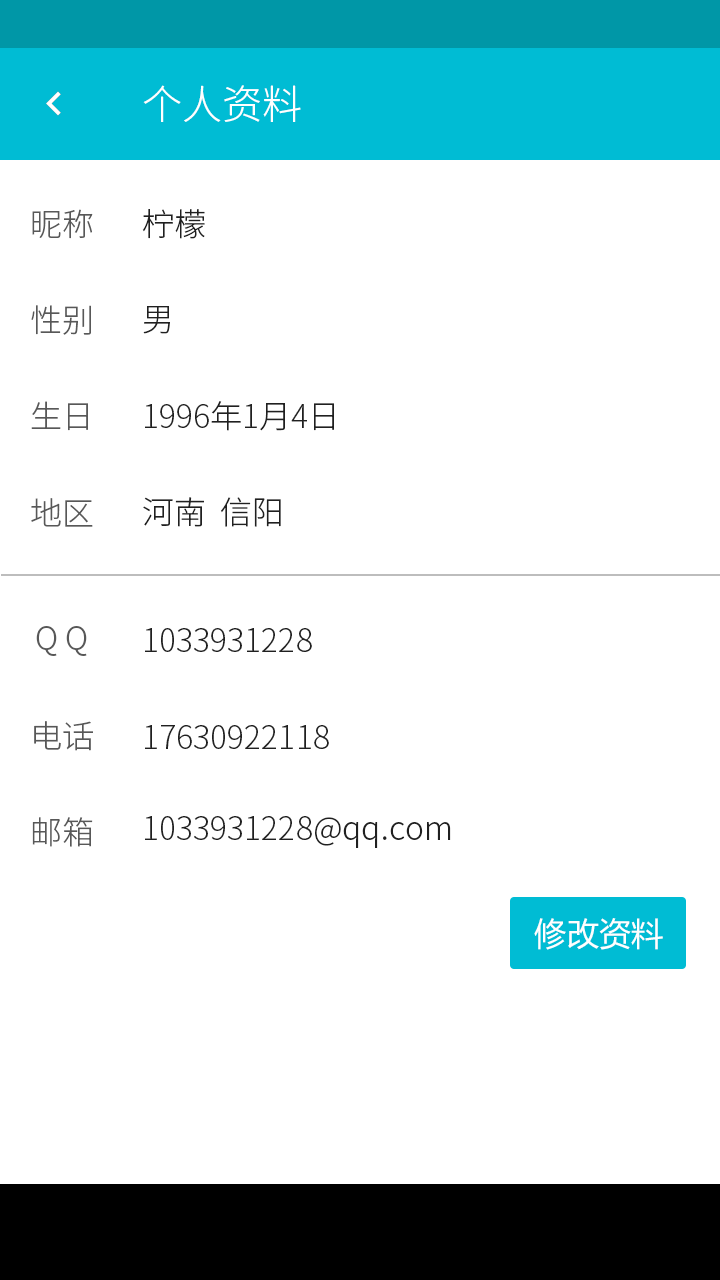
<style>
.page{position:relative;width:720px;height:1280px;background:#ffffff}
.page>*{position:absolute;margin:0}
.t1{font:40px "SourceHanSansCN-Light";color:#ffffff}
.t2{font:32px "SourceHanSansCN-Light";color:#585858}
.t3{font:32px "SourceHanSansCN-Light";color:#202020}
.t4{font:32px "MicrosoftYaHei";letter-spacing:0.01em;color:#ffffff}
</style>
<div class="page">
<p class="t1" style="left:143px;top:85px;width:158px;height:37px">个人资料</p>
<p class="t2" style="left:32px;top:209px;width:61px;height:30px">昵称</p>
<p class="t3" style="left:142px;top:209px;width:63px;height:30px">柠檬</p>
<p class="t2" style="left:31px;top:305px;width:60px;height:30px">性别</p>
<p class="t3" style="left:143px;top:306px;width:27px;height:28px">男</p>
<p class="t2" style="left:31px;top:401px;width:57px;height:30px">生日</p>
<p class="t3" style="left:145px;top:401px;width:189px;height:30px">1996年1月4日</p>
<p class="t3" style="left:143px;top:497px;width:138px;height:30px">河南  信阳</p>
<p class="t2" style="left:31px;top:498px;width:62px;height:29px">地区</p>
<p class="t2" style="left:36px;top:626px;width:51px;height:30px">Q Q</p>
<p class="t3" style="left:145px;top:628px;width:167px;height:24px">1033931228</p>
<p class="t2" style="left:34px;top:721px;width:59px;height:30px">电话</p>
<p class="t3" style="left:145px;top:725px;width:184px;height:24px">17630922118</p>
<p class="t2" style="left:32px;top:817px;width:61px;height:30px">邮箱</p>
<p class="t3" style="left:145px;top:816px;width:306px;height:32px">1033931228@qq.com</p>
<p class="t4" style="left:534px;top:918px;width:129px;height:32px">修改资料</p>
</div>
